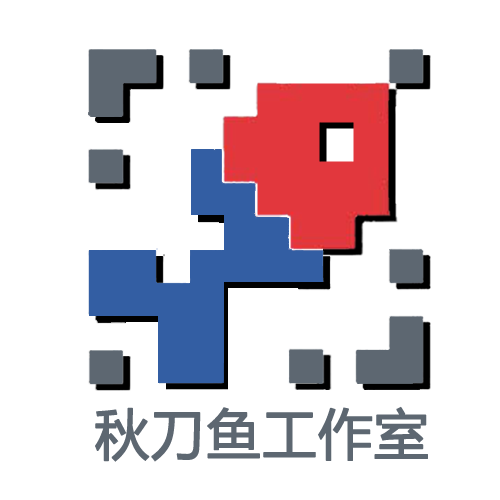
<style>
.page{position:relative;width:500px;height:500px;background:#ffffff}
.page>*{position:absolute;margin:0}
.t1{font:54.3px "MicrosoftYaHei";color:#5d6771;font-weight:bold}
</style>
<div class="page">
<p class="t1" style="left:95px;top:406px;width:333px;height:56px">秋刀鱼工作室</p>
</div>
